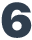
<style>
.page{position:relative;width:32px;height:40px;background:#2f3e4e}
.page>*{position:absolute;margin:0}
.t1{font:48px "SFProDisplay-Black";color:#2f3e4e}
</style>
<div class="page">
<p class="t1" style="left:1px;top:2px;width:31px;height:36px">6</p>
</div>
